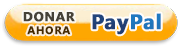
<style>
.page{position:relative;width:183px;height:46px}
.page>*{position:absolute;margin:0}
.t1{font:13px "SegoeUI-Bold";letter-spacing:0.05em;font-weight:bold}
.t2{font:11px "SegoeUI-Bold";letter-spacing:0.05em;font-weight:bold}
.t3{font:21px "SegoeUI-Bold";letter-spacing:0.03em;font-weight:bold}
</style>
<div class="page">
<p class="t1" style="left:23px;top:11px;width:52px;height:24px;text-align:center">DONAR<br><span class="t2">AHORA</span></p>
<p class="t3" style="left:92px;top:13px;width:69px;height:22px">PayPal</p>
</div>
